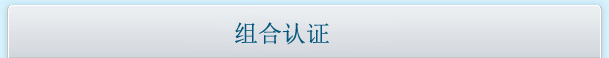
<style>
.page{position:relative;width:609px;height:58px}
.page>*{position:absolute;margin:0}
.t1{font:24px "SimSun";color:#04567c}
</style>
<div class="page">
<p class="t1" style="left:235px;top:22px;width:94px;height:23px">组合认证</p>
</div>
